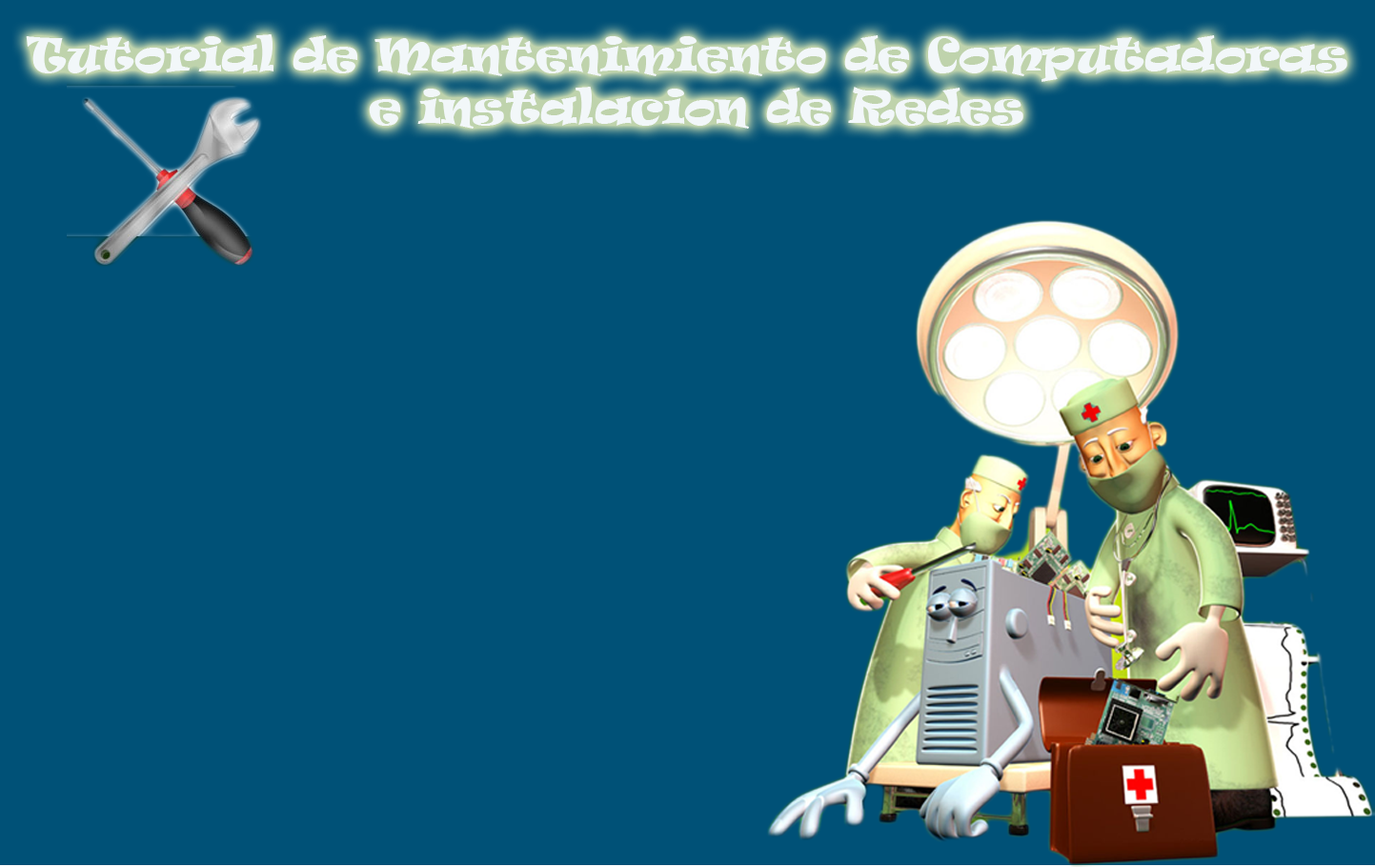
<style>
.page{position:relative;width:1375px;height:867px;background:#005177}
.page>*{position:absolute;margin:0}
.t1{font:43.7px "Ravie";color:#f2f7f9}
</style>
<div class="page">
<p class="t1" style="left:26px;top:34px;width:1321px;height:95px;text-align:center">Tutorial de Mantenimiento de Computadoras <br>e instalacion de Redes</p>
</div>
